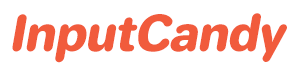
<style>
.page{position:relative;width:300px;height:73px;background:#ffffff}
.page>*{position:absolute;margin:0}
.t1{font:48px "Jellee-Roman";color:#f15b3c;font-style:italic}
</style>
<div class="page">
<p class="t1" style="left:12px;top:13px;width:275px;height:50px">InputCandy</p>
</div>
